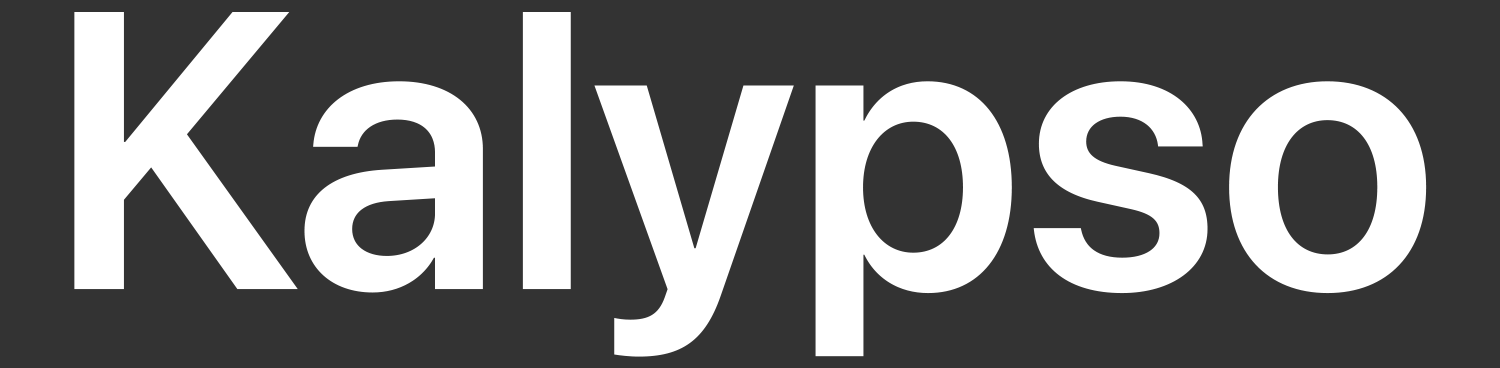
<style>
.page{position:relative;width:1500px;height:368px;background:#333333}
.page>*{position:absolute;margin:0}
.t1{font:393.1px "SFProDisplay-Semibold";color:#ffffff}
</style>
<div class="page">
<p class="t1" style="left:74px;top:12px;width:1353px;height:345px">Kalypso</p>
</div>
